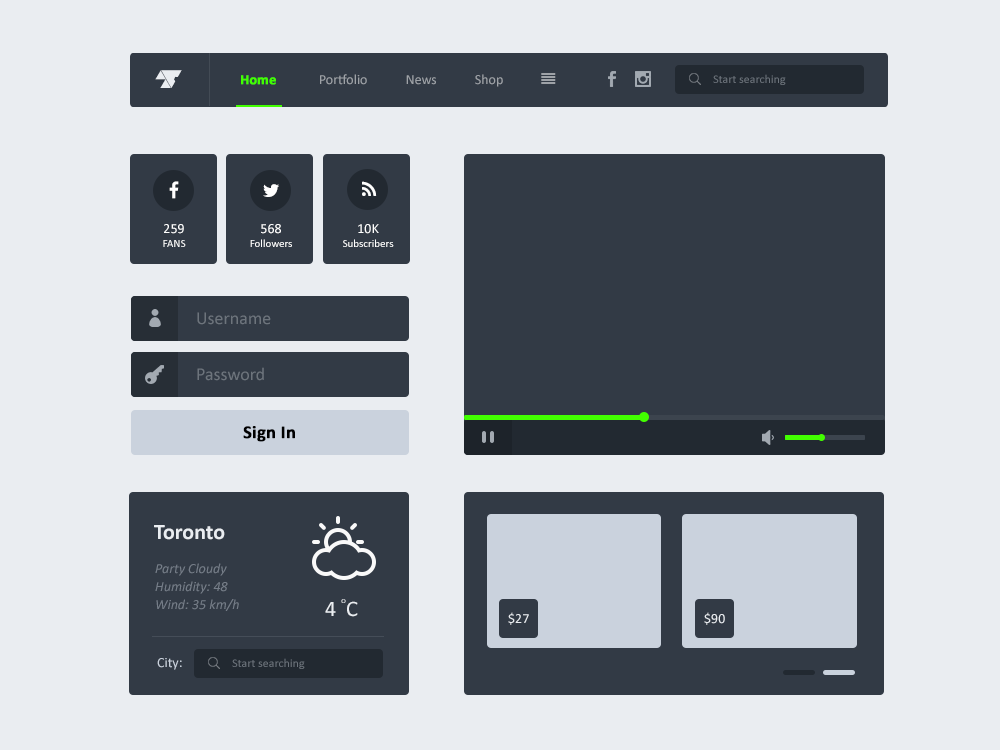
<style>
.page{position:relative;width:1000px;height:750px;background:#eaedf1}
.page>*{position:absolute;margin:0}
.t1{font:30px "Covenant";color:#eaedf1;font-variant:small-caps}
.t2{font:12px "Calibri";color:#6d747c}
.t3{font:11px/14px "Calibri";color:#ffffff}
.t4{font:14px/14px "Calibri";color:#ffffff}
.t5{font:18px "Calibri";color:#6d747c}
.t6{font:18px "Calibri-Bold";color:#000000;font-weight:bold}
.t7{font:22px "Calibri-Bold";color:#eaedf1}
.t8{font:14px/18px "Calibri-Italic";color:#757d88}
.t9{font:22px "Calibri";color:#eaedf1}
.t10{font:8px "Calibri";scale:1.18 1}
.t11{font:14px "Calibri";color:#eaedf1}
.t12{font:14px "Calibri";color:#cad2dd}
</style>
<div class="page">
<p class="t1" style="left:155px;top:70px;width:27px;height:18px">L</p>
<p class="t2" style="left:713px;top:74px;width:73px;height:11px">Start searching</p>
<p class="t3" style="left:163px;top:224px;width:23px;height:23px;text-align:center"><span class="t4">259<br></span>FANS</p>
<p class="t3" style="left:250px;top:224px;width:42px;height:23px;text-align:center"><span class="t4">568<br></span>Followers</p>
<p class="t3" style="left:343px;top:224px;width:51px;height:23px;text-align:center"><span class="t4">10K<br></span>Subscribers</p>
<p class="t5" style="left:197px;top:312px;width:74px;height:13px">Username</p>
<p class="t5" style="left:197px;top:367px;width:67px;height:14px">Password</p>
<p class="t6" style="left:243px;top:426px;width:52px;height:16px">Sign In</p>
<p class="t7" style="left:154px;top:525px;width:71px;height:15px">Toronto</p>
<p class="t8" style="left:155px;top:563px;width:84px;height:48px">Party Cloudy<br>Humidity: 48<br>Wind: 35 km/h</p>
<p class="t9" style="left:325px;top:601px;width:33px;height:16px">4  C</p>
<p class="t10" style="left:341px;top:599px;width:5px;height:4px">o</p>
<p class="t11" style="left:508px;top:612px;width:21px;height:13px">$27</p>
<p class="t11" style="left:704px;top:612px;width:21px;height:13px">$90</p>
<p class="t12" style="left:157px;top:658px;width:25px;height:12px">City:</p>
<p class="t2" style="left:232px;top:658px;width:73px;height:11px">Start searching</p>
</div>
